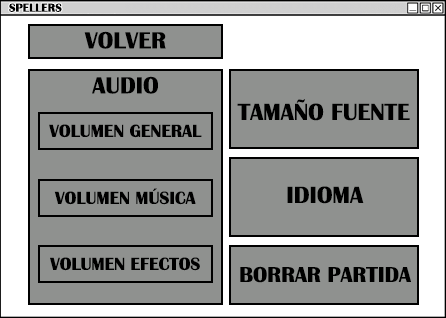
<style>
.page{position:relative;width:446px;height:318px;background:#8f918f}
.page>*{position:absolute;margin:0}
.t1{font:12px "BritannicBold";color:#000000}
.t2{font:24px "BritannicBold";color:#000000}
.t3{font:18px "BritannicBold";color:#000000}
.t4{font:22px "BritannicBold";color:#000000}
</style>
<div class="page">
<p class="t1" style="left:9px;top:3px;width:53px;height:9px">SPELLERS</p>
<p class="t2" style="left:84px;top:31px;width:82px;height:18px">VOLVER</p>
<p class="t2" style="left:92px;top:76px;width:66px;height:18px">AUDIO</p>
<p class="t2" style="left:237px;top:99px;width:173px;height:22px">TAMAÑO FUENTE</p>
<p class="t3" style="left:49px;top:124px;width:153px;height:14px">VOLUMEN GENERAL</p>
<p class="t3" style="left:54px;top:188px;width:142px;height:17px">VOLUMEN MÚSICA</p>
<p class="t2" style="left:287px;top:186px;width:77px;height:18px">IDIOMA</p>
<p class="t3" style="left:50px;top:257px;width:150px;height:14px">VOLUMEN EFECTOS</p>
<p class="t4" style="left:240px;top:266px;width:171px;height:17px">BORRAR PARTIDA</p>
</div>
